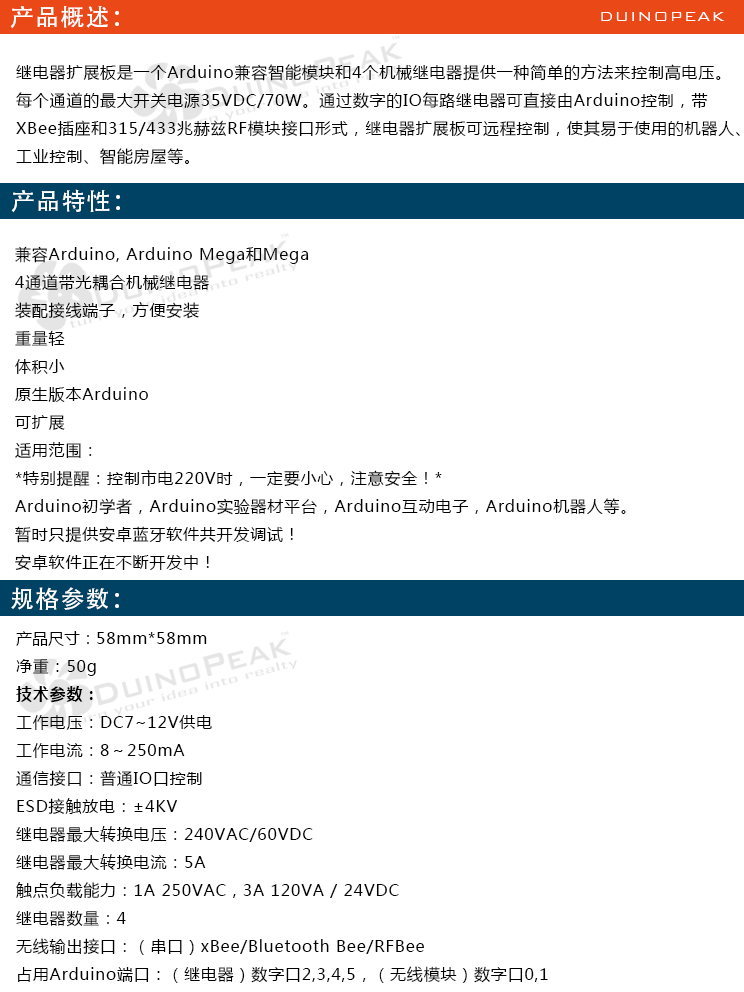
<style>
.page{position:relative;width:744px;height:992px;background:#ffffff}
.page>*{position:absolute;margin:0}
.t1{font:24px "AdobeHeitiStd-Regular";letter-spacing:0.05em;color:#ffffff}
.t2{font:18px "BankGothicBT-Light";letter-spacing:0.05em;color:#ffffff}
.t3{font:16px "MicrosoftYaHei";letter-spacing:0.05em;color:#000000}
.t4{font:16px "MicrosoftYaHei";color:#000000}
.t5{font:16px "MicrosoftYaHei-Bold";letter-spacing:0.05em;color:#000000}
</style>
<div class="page">
<p class="t1" style="left:10px;top:6px;width:109px;height:23px">产品概述：</p>
<p class="t2" style="left:601px;top:12px;width:124px;height:9px">DUINOPEAK</p>
<p class="t3" style="left:16px;top:64px;width:724px;height:101px">继电器扩展板是一个Arduino兼容智能模块和4个机械继电器提供一种简单的方法来控制高电压。<br>每个通道的最大开关电源35VDC/70W。通过数字的IO每路继电器可直接由Arduino控制，带<br>XBee插座和315/433兆赫兹RF模块接口形式，继电器扩展板可远程控制，使其易于使用的机器人、<br>工业控制、智能房屋等。</p>
<p class="t1" style="left:11px;top:189px;width:109px;height:24px">产品特性：</p>
<p class="t3" style="left:15px;top:246px;width:611px;height:324px">兼容Arduino, Arduino Mega和Mega<br>4通道带光耦合机械继电器<br>装配接线端子，方便安装<br>重量轻<br>体积小<br>原生版本Arduino<br>可扩展<br>适用范围：<br>*特别提醒：控制市电220V时，一定要小心，注意安全！*<br>Arduino初学者，Arduino实验器材平台，Arduino互动电子，Arduino机器人等。<br>暂时只提供安卓蓝牙软件共开发调试！<br>安卓软件正在不断开发中！</p>
<p class="t1" style="left:11px;top:587px;width:108px;height:23px">规格参数：</p>
<p class="t3" style="left:16px;top:631px;width:532px;height:352px"><span class="t4">产品尺寸：</span>58mm*58mm<br>净重：50g<br><span class="t5">技术参数：<br></span>工作电压：DC7~12V供电<br>工作电流：8～250mA<br>通信接口：普通IO口控制<br>ESD接触放电：±4KV<br>继电器最大转换电压：240VAC/60VDC<br>继电器最大转换电流：5A<br>触点负载能力：1A 250VAC , 3A 120VA / 24VDC<br>继电器数量：4<br>无线输出接口：（串口）xBee/Bluetooth Bee/RFBee<br>占用Arduino端口：（继电器）数字口2,3,4,5，（无线模块）数字口0,1</p>
</div>
